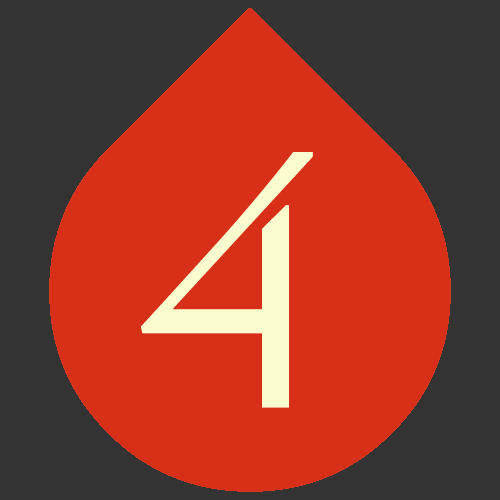
<style>
.page{position:relative;width:500px;height:500px;background:#d83018}
.page>*{position:absolute;margin:0}
.t1{font:370px "Cochin";letter-spacing:0.015em;color:#fdfcce}
</style>
<div class="page">
<p class="t1" style="left:141px;top:152px;width:172px;height:256px">4</p>
</div>
